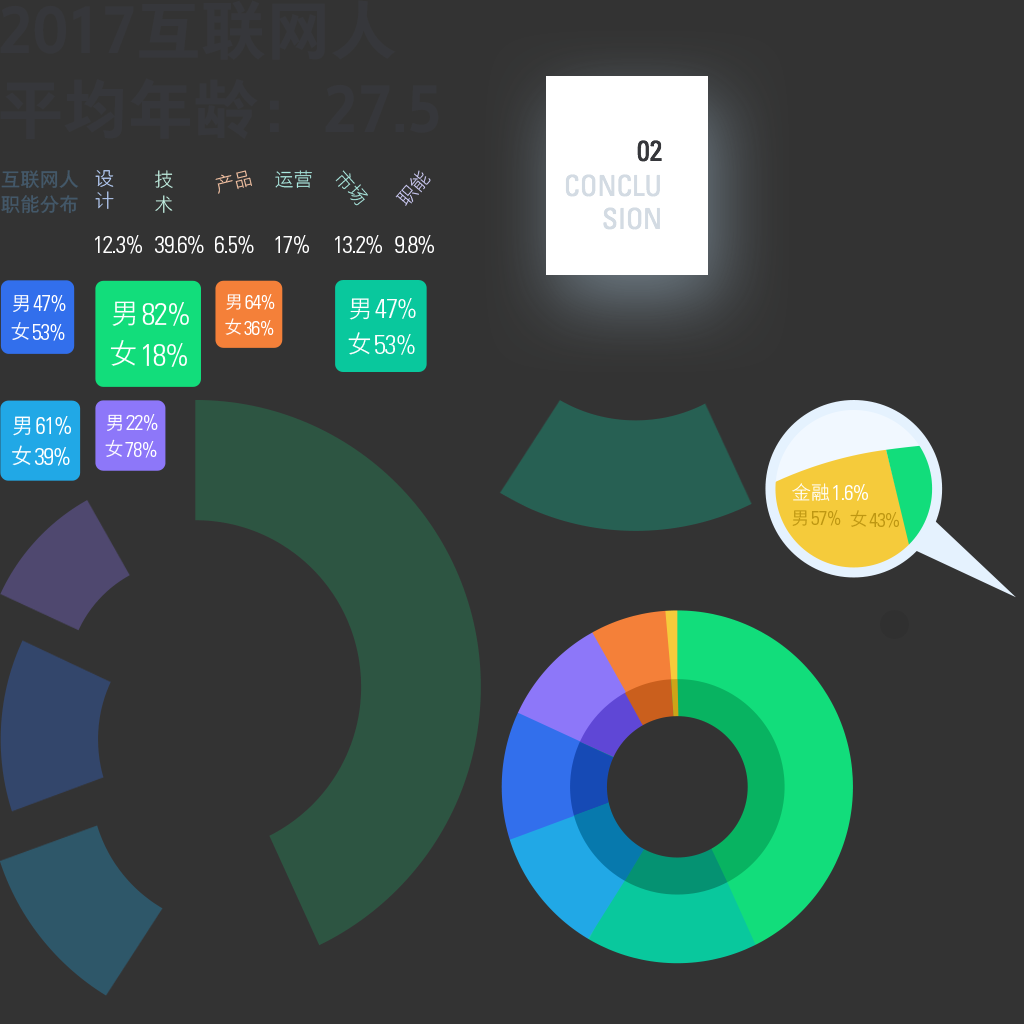
<style>
.page{position:relative;width:1024px;height:1024px;background:#333333}
.page>*{position:absolute;margin:0}
.t1{font:64.9px/78.9px "FZYOUH_512B--GB1-4";color:#36373b}
.t2{font:28.4px "UniversLTStd-Cn";color:#36373b;text-transform:uppercase}
.t3{font:19.5px/24.9px "FZYOUH_509R--GB1-4";color:#435869}
.t4{font:19.5px/22.7px "FZYOUH_503L--GB1-4";color:#b7cff9}
.t5{font:19.5px/24.9px "FZYOUH_503L--GB1-4";color:#c4f3e5}
.t6{font:19.5px "FZYOUH_503L--GB1-4";letter-spacing:-0.05em}
.t7{font:19.5px "FZYOUH_503L--GB1-4";color:#abeae1}
.t8{font:19.4px "FZYOUH_503L--GB1-4";color:#abeae1}
.t9{font:19.4px "FZYOUH_503L--GB1-4";color:#d3d1fd}
.t10{font:28.4px/33.6px "UniversLTStd-Cn";color:#d3dbe3;text-transform:uppercase}
.t11{font:23.8px "UniversLTStd-LightCn";letter-spacing:-0.05em;color:#ffffff}
.t12{font:18.1px "FZYOUH_504L--GB1-4";letter-spacing:-0.05em;color:#ffffff}
.t13{font:19.9px "UniversLTStd-LightCn";letter-spacing:-0.05em;color:#ffffff}
.t14{font:19.9px "FZYOUH_504L--GB1-4";letter-spacing:-0.05em;color:#ffffff}
.t15{font:21.9px "UniversLTStd-LightCn";letter-spacing:-0.05em;color:#ffffff}
.t16{font:28.7px "FZYOUH_504L--GB1-4";letter-spacing:-0.05em;color:#ffffff}
.t17{font:31.5px "UniversLTStd-LightCn";letter-spacing:-0.05em;color:#ffffff}
.t18{font:24.9px "FZYOUH_504L--GB1-4";letter-spacing:-0.05em;color:#ffffff}
.t19{font:27.3px "UniversLTStd-LightCn";letter-spacing:-0.05em;color:#ffffff}
.t20{font:19px "FZYOUH_504L--GB1-4";letter-spacing:-0.05em;color:#ffffff}
.t21{font:20.9px "UniversLTStd-LightCn";letter-spacing:-0.05em;color:#ffffff}
.t22{font:21.6px "FZYOUH_504L--GB1-4";letter-spacing:-0.05em;color:#ffffff}
.t23{font:19.5px "FZYOUH_503L--GB1-4"}
.t24{font:21.6px "UniversLTStd-LightCn";letter-spacing:-0.05em;color:#ffffff}
.t25{font:18.1px "FZYOUH_504L--GB1-4";letter-spacing:-0.05em;color:#be9712}
.t26{font:19.9px "UniversLTStd-LightCn";letter-spacing:-0.05em;color:#be9712}
</style>
<div class="page">
<p class="t1" style="left:0px;top:0px;width:439px;height:139px">2017互联网人<br>平均年龄：27.5</p>
<p class="t2" style="left:637px;top:140px;width:25px;height:22px">02</p>
<p class="t3" style="left:1px;top:170px;width:78px;height:44px;text-align:center">互联网人<br>职能分布</p>
<p class="t4" style="left:95px;top:170px;width:19px;height:39px;text-align:center">设<br>计</p>
<p class="t5" style="left:155px;top:170px;width:18px;height:43px;text-align:center">技<br>术</p>
<p class="t6" style="left:215px;top:170px;width:37px;height:24px;rotate:-14deg">产品</p>
<p class="t7" style="left:275px;top:170px;width:37px;height:18px">运营</p>
<p class="t8" style="left:335px;top:170px;width:33px;height:36px;rotate:48deg">市场</p>
<p class="t9" style="left:395px;top:170px;width:36px;height:36px;rotate:-49deg">职能</p>
<p class="t10" style="left:565px;top:174px;width:95px;height:56px;text-align:right">conclu<br>sion</p>
<p class="t11" style="left:95px;top:235px;width:47px;height:19px">12.3%</p>
<p class="t11" style="left:155px;top:235px;width:49px;height:19px">39.6%</p>
<p class="t11" style="left:215px;top:235px;width:39px;height:19px">6.5%</p>
<p class="t11" style="left:275px;top:235px;width:34px;height:19px">17%</p>
<p class="t11" style="left:335px;top:235px;width:47px;height:19px">13.2%</p>
<p class="t11" style="left:395px;top:235px;width:39px;height:19px">9.8%</p>
<p class="t12" style="left:226px;top:294px;width:15px;height:16px">男</p>
<p class="t13" style="left:245px;top:294px;width:30px;height:16px">64%</p>
<p class="t14" style="left:13px;top:295px;width:16px;height:17px">男</p>
<p class="t15" style="left:33px;top:295px;width:33px;height:17px">47%</p>
<p class="t16" style="left:112px;top:301px;width:24px;height:25px">男</p>
<p class="t17" style="left:142px;top:302px;width:47px;height:24px">82%</p>
<p class="t18" style="left:349px;top:298px;width:21px;height:22px">男</p>
<p class="t19" style="left:375px;top:298px;width:41px;height:21px">47%</p>
<p class="t12" style="left:225px;top:318px;width:17px;height:17px">女</p>
<p class="t14" style="left:11px;top:322px;width:19px;height:18px">女</p>
<p class="t15" style="left:33px;top:324px;width:32px;height:17px">53%</p>
<p class="t13" style="left:244px;top:320px;width:30px;height:16px">36%</p>
<p class="t16" style="left:110px;top:340px;width:26px;height:26px">女</p>
<p class="t18" style="left:348px;top:332px;width:23px;height:23px">女</p>
<p class="t19" style="left:375px;top:334px;width:40px;height:21px">53%</p>
<p class="t17" style="left:143px;top:343px;width:44px;height:24px">18%</p>
<p class="t20" style="left:107px;top:414px;width:15px;height:17px">男</p>
<p class="t21" style="left:126px;top:414px;width:32px;height:17px">22%</p>
<p class="t22" style="left:13px;top:416px;width:18px;height:20px">男</p>
<p class="t11" style="left:36px;top:416px;width:35px;height:19px">61%</p>
<p class="t22" style="left:12px;top:445px;width:19px;height:21px">女</p>
<p class="t11" style="left:35px;top:447px;width:35px;height:19px">39%</p>
<p class="t20" style="left:105px;top:439px;width:18px;height:18px">女</p>
<p class="t21" style="left:125px;top:441px;width:32px;height:17px">78%</p>
<p class="t23" style="left:792px;top:483px;width:38px;height:18px">金融</p>
<p class="t24" style="left:833px;top:484px;width:35px;height:17px">1.6%</p>
<p class="t25" style="left:792px;top:510px;width:15px;height:16px">男</p>
<p class="t26" style="left:811px;top:510px;width:30px;height:16px">57%</p>
<p class="t25" style="left:850px;top:510px;width:17px;height:17px">女</p>
<p class="t26" style="left:869px;top:512px;width:30px;height:16px">43%</p>
</div>
